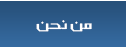
<style>
.page{position:relative;width:126px;height:48px}
.page>*{position:absolute;margin:0}
.t1{font:20px "SC_KHALID";color:#ffffff;scale:1.07 1}
</style>
<div class="page">
<p class="t1" style="left:36px;top:20px;width:56px;height:12px">من نحن</p>
</div>
